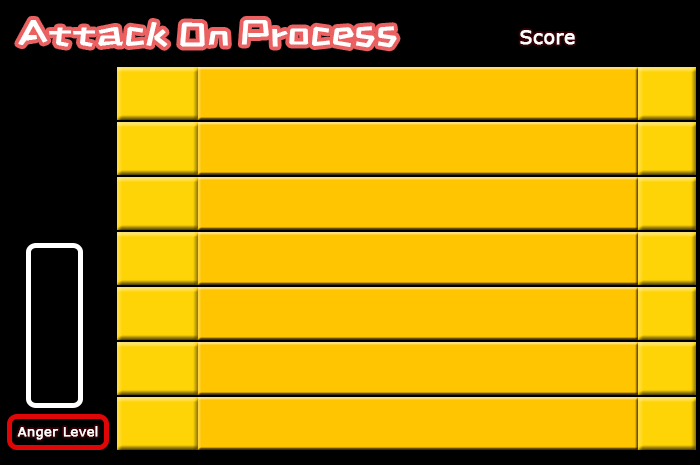
<style>
.page{position:relative;width:700px;height:465px;background:#ffc501}
.page>*{position:absolute;margin:0}
.t1{font:35.1px "ZCOOLKuaiLe-Regular";color:#ffffff;font-weight:bold;scale:1.09 1}
.t2{font:19px "Verdana";color:#ffffff;font-weight:bold}
</style>
<div class="page">
<p class="t1" style="left:18px;top:20px;width:379px;height:28px">Attack On Process</p>
<p class="t2" style="left:520px;top:30px;width:55px;height:15px">Score</p>
</div>
